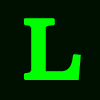
<style>
.page{position:relative;width:100px;height:100px;background:#001000}
.page>*{position:absolute;margin:0}
.t1{font:80px "Superclarendon-Regular";color:#00ff00;font-weight:bold}
</style>
<div class="page">
<p class="t1" style="left:24px;top:18px;width:57px;height:62px">L</p>
</div>
